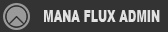
<style>
.page{position:relative;width:168px;height:32px;background:#333333}
.page>*{position:absolute;margin:0}
.t1{font:16.5px "Arial-Black";color:#e1e1e1;scale:0.67 1}
</style>
<div class="page">
<p class="t1" style="left:44px;top:10px;width:116px;height:12px">MANA FLUX ADMIN</p>
</div>
